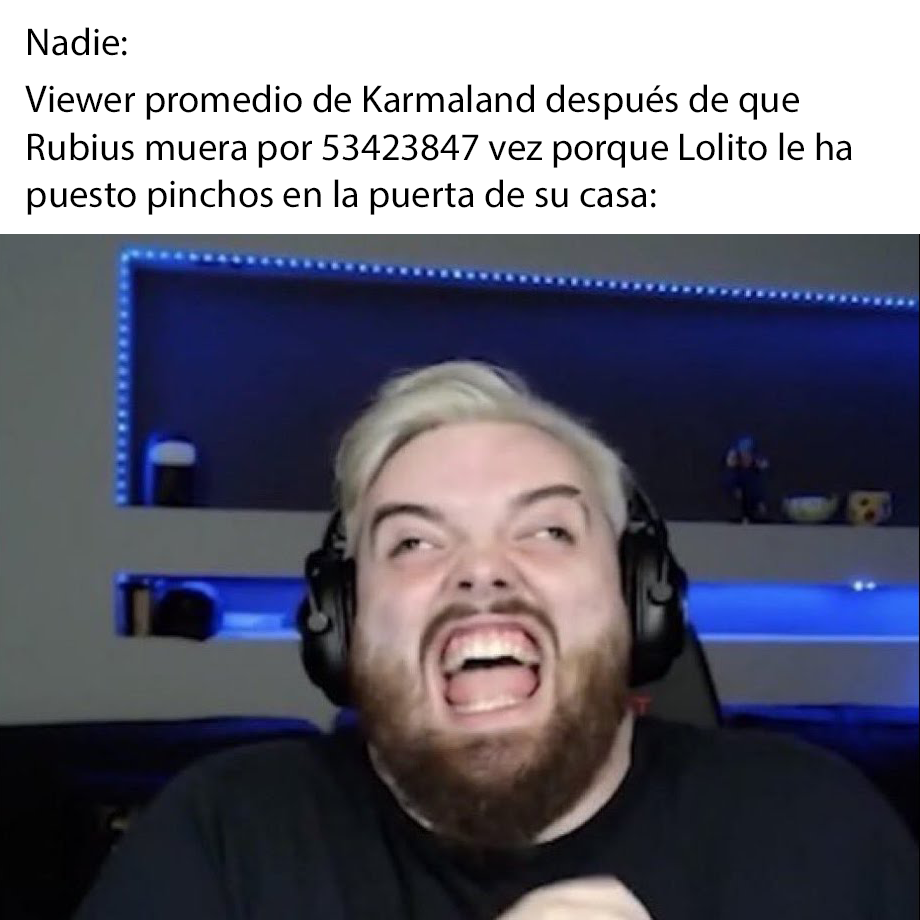
<style>
.page{position:relative;width:920px;height:920px;background:#ffffff}
.page>*{position:absolute;margin:0}
.t1{font:38.8px "MyriadPro-Regular";color:#000000}
</style>
<div class="page">
<p class="t1" style="left:25px;top:27px;width:827px;height:188px">Nadie:<br>Viewer promedio de Karmaland después de que<br>Rubius muera por 53423847 vez porque Lolito le ha<br>puesto pinchos en la puerta de su casa:</p>
</div>
